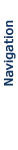
<style>
.page{position:relative;width:18px;height:150px;background:#ffffff}
.page>*{position:absolute;margin:0}
.t1{font:12px "Verdana";color:#153763;font-weight:bold}
</style>
<div class="page">
<p class="t1" style="left:4px;top:20px;width:12px;height:66px;rotate:-90deg">Navigation</p>
</div>
